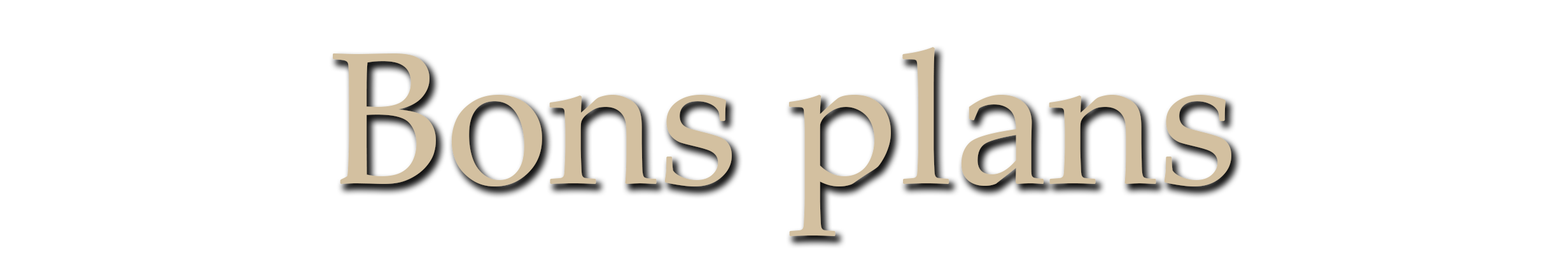
<style>
.page{position:relative;width:1568px;height:280px;background:#ffffff}
.page>*{position:absolute;margin:0}
.t1{font:188.6px "PalatinoLinotype-Roman";color:#d3c0a0}
</style>
<div class="page">
<p class="t1" style="left:333px;top:47px;width:898px;height:189px">Bons plans</p>
</div>
